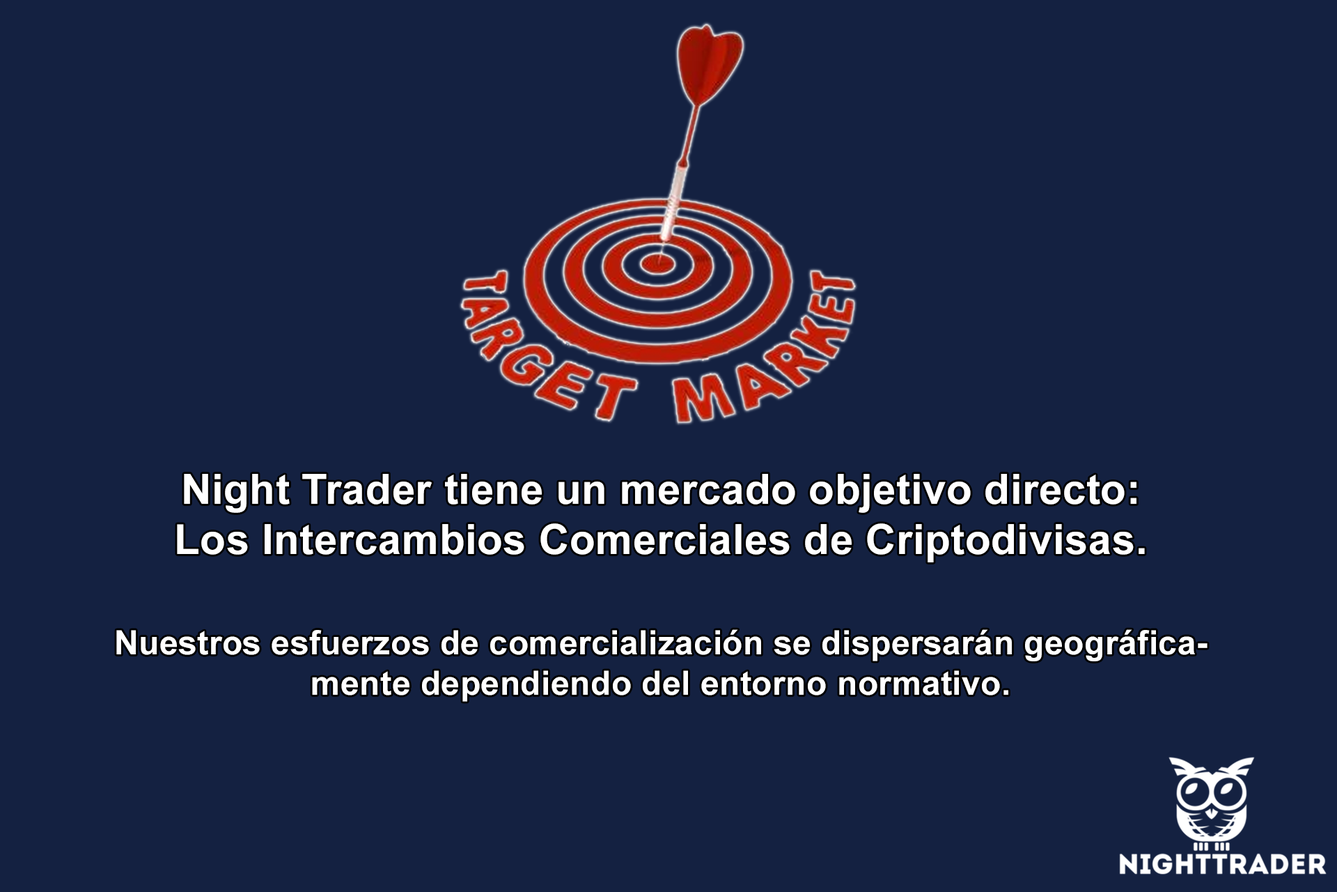
<style>
.page{position:relative;width:1337px;height:892px;background:#142141}
.page>*{position:absolute;margin:0}
.t1{font:33.4px "Arial-BoldMT";letter-spacing:0.01em;color:#ffffff}
.t2{font:41.8px "Arial-BoldMT";letter-spacing:0.01em;color:#ffffff}
</style>
<div class="page">
<p class="t1" style="left:116px;top:474px;width:1092px;height:227px;text-align:center"><span class="t2"><br><br><br><br><br><br><br><br><br>Night Trader tiene un mercado objetivo directo:  <br>Los Intercambios Comerciales de Criptodivisas.<br><br></span>Nuestros esfuerzos de comercialización se dispersarán geográficamente dependiendo del entorno normativo.</p>
</div>
